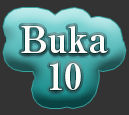
<style>
.page{position:relative;width:129px;height:115px;background:#333333}
.page>*{position:absolute;margin:0}
.t1{font:36px/37px "RyuminPro-ExBold";color:#fbfbf9}
</style>
<div class="page">
<p class="t1" style="left:21px;top:26px;width:87px;height:64px;text-align:center">Buka<br>10</p>
</div>
